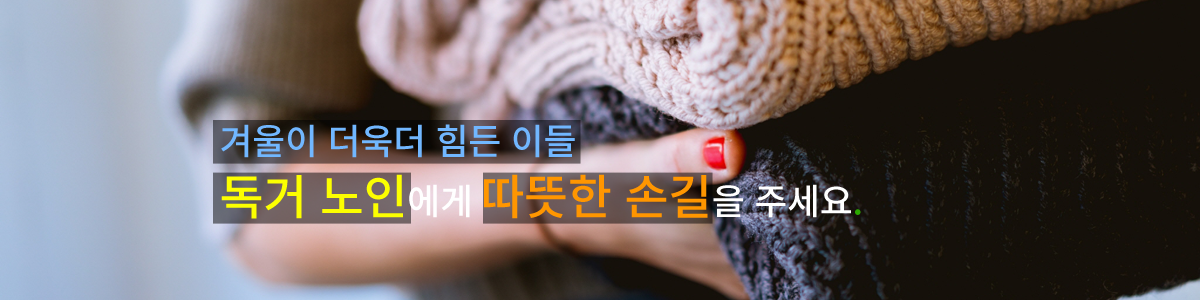
<style>
.page{position:relative;width:1200px;height:300px}
.page>*{position:absolute;margin:0}
.t1{font:36px/60px "NotoSansKR-Medium";letter-spacing:-0.01em;color:#71b7ff}
.t2{font:48px/60px "NotoSansKR-Medium";letter-spacing:-0.01em;color:#fcff00}
.t3{font:36px/60px "NotoSansKR-Medium";letter-spacing:-0.01em;color:#ffffff}
.t4{font:48px/60px "NotoSansKR-Medium";letter-spacing:-0.01em;color:#ff9600}
.t5{font:36px/60px "NotoSansKR-Medium";letter-spacing:-0.01em;color:#2ba800}
</style>
<div class="page">
<p class="t1" style="left:221px;top:124px;width:640px;height:95px">겨울이 더욱더 힘든 이들<br><span class="t2">독거 노인</span><span class="t3">에게 </span><span class="t4">따뜻한 손길</span><span class="t3">을 주세요</span><span class="t5">.</span></p>
</div>
